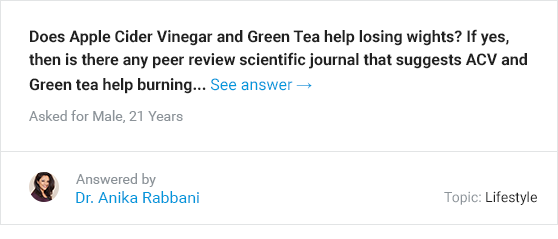
<style>
.page{position:relative;width:558px;height:239px;background:#ffffff}
.page>*{position:absolute;margin:0}
.t1{font:16px/23px "Roboto-Bold";color:#212121}
.t2{font:16px/25px "Roboto-Regular";color:#0097db}
.t3{font:16px/25px "TimesNewRomanPSMT";color:#0096db}
.t4{font:14px "Roboto-Regular";color:#8c9399}
.t5{font:16px "Roboto-Regular";color:#0097db}
.t6{font:14px "Roboto-Regular";color:#212121}
</style>
<div class="page">
<p class="t1" style="left:29px;top:29px;width:498px;height:65px">Does Apple Cider Vinegar and Green Tea help losing wights? If yes, then is there any peer review scientific journal that suggests ACV and Green tea help burning... <span class="t2">See answer </span><span class="t3">→</span></p>
<p class="t4" style="left:29px;top:110px;width:154px;height:13px">Asked for Male, 21 Years</p>
<p class="t4" style="left:76px;top:173px;width:80px;height:14px">Answered by</p>
<p class="t5" style="left:76px;top:191px;width:123px;height:12px">Dr. Anika Rabbani</p>
<p class="t6" style="left:444px;top:191px;width:93px;height:14px"><span class="t4">Topic: </span>Lifestyle</p>
</div>
